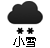
<style>
.page{position:relative;width:50px;height:48px;background:#ffffff}
.page>*{position:absolute;margin:0}
.t1{font:12px "OPPOSans-R";color:#000000}
</style>
<div class="page">
<p class="t1" style="left:13px;top:36px;width:23px;height:11px">小雪</p>
</div>
